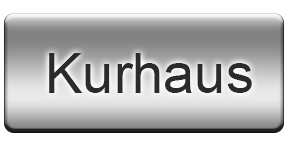
<style>
.page{position:relative;width:288px;height:144px;background:#ffffff}
.page>*{position:absolute;margin:0}
.t1{font:56px "ArialMT";color:#2b2b2b}
</style>
<div class="page">
<p class="t1" style="left:49px;top:53px;width:203px;height:40px">Kurhaus</p>
</div>
